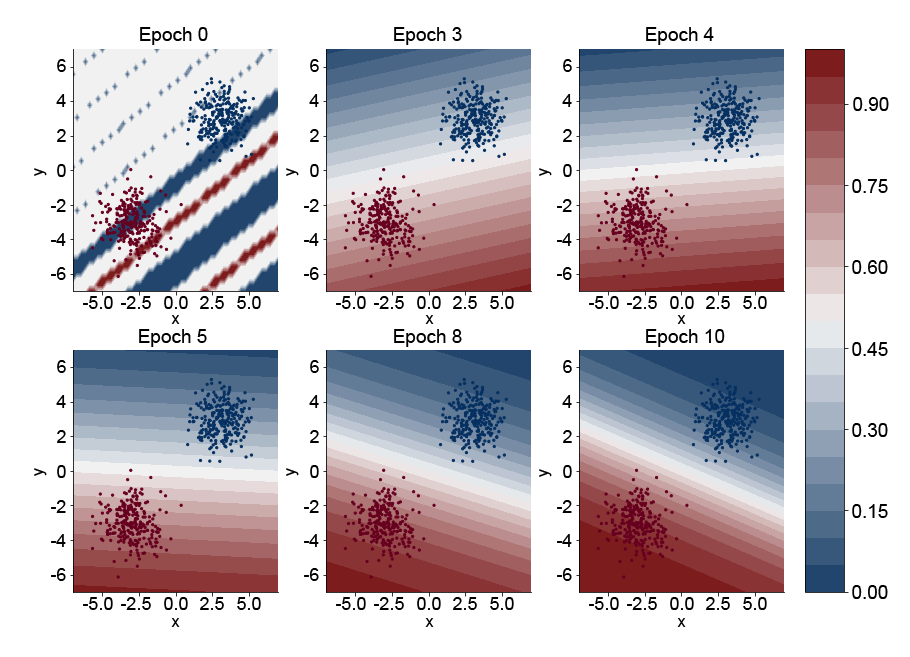
<style>
.page{position:relative;width:910px;height:657px;background:#ffffff}
.page>*{position:absolute;margin:0}
.t1{font:19px "ArialMT";color:#000000}
.t2{font:18px "ArialMT";color:#000000}
.t3{font:16px "ArialMT";color:#000000}
</style>
<div class="page">
<p class="t1" style="left:140px;top:27px;width:68px;height:18px">Epoch 0</p>
<p class="t1" style="left:394px;top:27px;width:68px;height:18px">Epoch 3</p>
<p class="t1" style="left:646px;top:27px;width:68px;height:18px">Epoch 4</p>
<p class="t2" style="left:57px;top:59px;width:9px;height:13px">6</p>
<p class="t2" style="left:310px;top:59px;width:9px;height:13px">6</p>
<p class="t2" style="left:563px;top:59px;width:9px;height:13px">6</p>
<p class="t2" style="left:56px;top:94px;width:10px;height:13px">4</p>
<p class="t2" style="left:309px;top:94px;width:10px;height:13px">4</p>
<p class="t2" style="left:562px;top:94px;width:10px;height:13px">4</p>
<p class="t1" style="left:853px;top:97px;width:36px;height:14px">0.90</p>
<p class="t2" style="left:57px;top:129px;width:9px;height:13px">2</p>
<p class="t2" style="left:310px;top:129px;width:9px;height:13px">2</p>
<p class="t2" style="left:563px;top:129px;width:9px;height:13px">2</p>
<p class="t3" style="left:34px;top:168px;width:13px;height:8px;rotate:-90deg">y</p>
<p class="t2" style="left:57px;top:164px;width:9px;height:13px">0</p>
<p class="t3" style="left:286px;top:168px;width:13px;height:8px;rotate:-90deg">y</p>
<p class="t2" style="left:310px;top:164px;width:9px;height:13px">0</p>
<p class="t3" style="left:539px;top:168px;width:13px;height:8px;rotate:-90deg">y</p>
<p class="t2" style="left:563px;top:164px;width:9px;height:13px">0</p>
<p class="t1" style="left:852px;top:179px;width:36px;height:14px">0.75</p>
<p class="t2" style="left:51px;top:199px;width:15px;height:13px">-2</p>
<p class="t2" style="left:304px;top:199px;width:15px;height:13px">-2</p>
<p class="t2" style="left:557px;top:199px;width:15px;height:13px">-2</p>
<p class="t2" style="left:51px;top:233px;width:15px;height:13px">-4</p>
<p class="t2" style="left:304px;top:233px;width:15px;height:13px">-4</p>
<p class="t2" style="left:557px;top:233px;width:15px;height:13px">-4</p>
<p class="t2" style="left:51px;top:267px;width:15px;height:13px">-6</p>
<p class="t2" style="left:304px;top:267px;width:15px;height:13px">-6</p>
<p class="t2" style="left:557px;top:267px;width:15px;height:13px">-6</p>
<p class="t1" style="left:852px;top:260px;width:36px;height:14px">0.60</p>
<p class="t2" style="left:83px;top:296px;width:30px;height:13px">-5.0</p>
<p class="t2" style="left:121px;top:296px;width:30px;height:13px">-2.5</p>
<p class="t2" style="left:164px;top:296px;width:24px;height:13px">0.0</p>
<p class="t2" style="left:200px;top:296px;width:24px;height:13px">2.5</p>
<p class="t2" style="left:237px;top:296px;width:24px;height:13px">5.0</p>
<p class="t2" style="left:336px;top:296px;width:30px;height:13px">-5.0</p>
<p class="t2" style="left:374px;top:296px;width:30px;height:13px">-2.5</p>
<p class="t2" style="left:417px;top:296px;width:24px;height:13px">0.0</p>
<p class="t2" style="left:453px;top:296px;width:24px;height:13px">2.5</p>
<p class="t2" style="left:490px;top:296px;width:24px;height:13px">5.0</p>
<p class="t2" style="left:589px;top:296px;width:30px;height:13px">-5.0</p>
<p class="t2" style="left:627px;top:296px;width:30px;height:13px">-2.5</p>
<p class="t2" style="left:670px;top:296px;width:24px;height:13px">0.0</p>
<p class="t2" style="left:706px;top:296px;width:24px;height:13px">2.5</p>
<p class="t2" style="left:743px;top:296px;width:24px;height:13px">5.0</p>
<p class="t3" style="left:171px;top:315px;width:9px;height:9px">x</p>
<p class="t3" style="left:425px;top:315px;width:9px;height:9px">x</p>
<p class="t3" style="left:677px;top:315px;width:9px;height:9px">x</p>
<p class="t1" style="left:139px;top:329px;width:68px;height:18px">Epoch 5</p>
<p class="t1" style="left:394px;top:329px;width:68px;height:18px">Epoch 8</p>
<p class="t1" style="left:646px;top:329px;width:79px;height:18px">Epoch 10</p>
<p class="t1" style="left:852px;top:342px;width:36px;height:14px">0.45</p>
<p class="t2" style="left:57px;top:360px;width:9px;height:13px">6</p>
<p class="t2" style="left:310px;top:360px;width:9px;height:13px">6</p>
<p class="t2" style="left:563px;top:360px;width:9px;height:13px">6</p>
<p class="t2" style="left:56px;top:395px;width:10px;height:13px">4</p>
<p class="t2" style="left:309px;top:395px;width:10px;height:13px">4</p>
<p class="t2" style="left:562px;top:395px;width:10px;height:13px">4</p>
<p class="t1" style="left:852px;top:423px;width:36px;height:14px">0.30</p>
<p class="t2" style="left:57px;top:430px;width:9px;height:13px">2</p>
<p class="t2" style="left:310px;top:430px;width:9px;height:13px">2</p>
<p class="t2" style="left:563px;top:430px;width:9px;height:13px">2</p>
<p class="t3" style="left:34px;top:468px;width:13px;height:8px;rotate:-90deg">y</p>
<p class="t2" style="left:57px;top:465px;width:9px;height:13px">0</p>
<p class="t3" style="left:286px;top:468px;width:13px;height:8px;rotate:-90deg">y</p>
<p class="t2" style="left:310px;top:465px;width:9px;height:13px">0</p>
<p class="t3" style="left:539px;top:469px;width:13px;height:8px;rotate:-90deg">y</p>
<p class="t2" style="left:563px;top:465px;width:9px;height:13px">0</p>
<p class="t2" style="left:51px;top:500px;width:15px;height:13px">-2</p>
<p class="t2" style="left:304px;top:500px;width:15px;height:13px">-2</p>
<p class="t2" style="left:557px;top:500px;width:15px;height:13px">-2</p>
<p class="t1" style="left:852px;top:504px;width:36px;height:14px">0.15</p>
<p class="t2" style="left:51px;top:534px;width:15px;height:13px">-4</p>
<p class="t2" style="left:304px;top:534px;width:15px;height:13px">-4</p>
<p class="t2" style="left:557px;top:534px;width:15px;height:13px">-4</p>
<p class="t2" style="left:51px;top:568px;width:15px;height:13px">-6</p>
<p class="t2" style="left:304px;top:568px;width:15px;height:13px">-6</p>
<p class="t2" style="left:557px;top:568px;width:15px;height:13px">-6</p>
<p class="t1" style="left:852px;top:585px;width:36px;height:14px">0.00</p>
<p class="t2" style="left:83px;top:597px;width:30px;height:13px">-5.0</p>
<p class="t2" style="left:121px;top:597px;width:30px;height:13px">-2.5</p>
<p class="t2" style="left:164px;top:597px;width:24px;height:13px">0.0</p>
<p class="t2" style="left:200px;top:597px;width:24px;height:13px">2.5</p>
<p class="t2" style="left:237px;top:597px;width:24px;height:13px">5.0</p>
<p class="t2" style="left:336px;top:597px;width:30px;height:13px">-5.0</p>
<p class="t2" style="left:374px;top:597px;width:30px;height:13px">-2.5</p>
<p class="t2" style="left:417px;top:597px;width:24px;height:13px">0.0</p>
<p class="t2" style="left:453px;top:597px;width:24px;height:13px">2.5</p>
<p class="t2" style="left:490px;top:597px;width:24px;height:13px">5.0</p>
<p class="t2" style="left:589px;top:597px;width:30px;height:13px">-5.0</p>
<p class="t2" style="left:627px;top:597px;width:30px;height:13px">-2.5</p>
<p class="t2" style="left:670px;top:597px;width:24px;height:13px">0.0</p>
<p class="t2" style="left:706px;top:597px;width:24px;height:13px">2.5</p>
<p class="t2" style="left:743px;top:597px;width:24px;height:13px">5.0</p>
<p class="t3" style="left:171px;top:618px;width:9px;height:9px">x</p>
<p class="t3" style="left:425px;top:618px;width:9px;height:9px">x</p>
<p class="t3" style="left:677px;top:618px;width:9px;height:9px">x</p>
</div>
